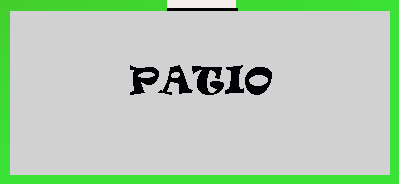
<style>
.page{position:relative;width:399px;height:184px;background:#d1d1d1}
.page>*{position:absolute;margin:0}
.t1{font:36px "Ravie";color:#000104}
</style>
<div class="page">
<p class="t1" style="left:130px;top:65px;width:142px;height:30px">PATIO</p>
</div>
